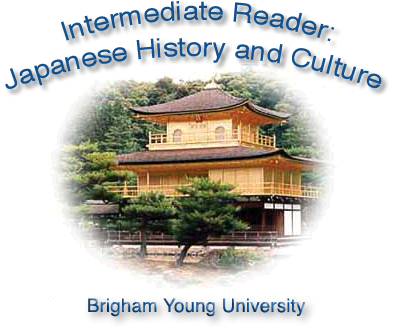
<style>
.page{position:relative;width:393px;height:336px;background:#ffffff}
.page>*{position:absolute;margin:0}
.t1{font:26.7px "Helvetica";letter-spacing:0.01em;color:#12518d}
.t2{font:18.7px "Helvetica";letter-spacing:0.01em}
</style>
<div class="page">
<p class="t1" style="left:61px;top:1px;width:274px;height:41px;rotate:2deg">Intermediate Reader:</p>
<p class="t1" style="left:5px;top:38px;width:377px;height:51px">Japanese History and Culture</p>
<p class="t2" style="left:88px;top:298px;width:218px;height:19px">Brigham Young University</p>
</div>
